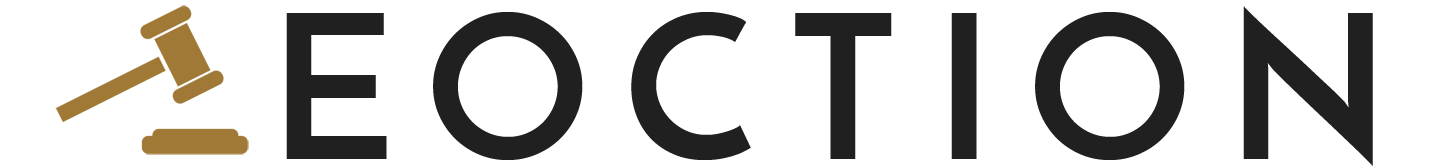
<style>
.page{position:relative;width:1440px;height:166px;background:#ffffff}
.page>*{position:absolute;margin:0}
.t1{font:200px "JosefinSans-Bold";letter-spacing:0.175em;color:#202020}
</style>
<div class="page">
<p class="t1" style="left:286px;top:6px;width:1087px;height:160px">EOCTION</p>
</div>
